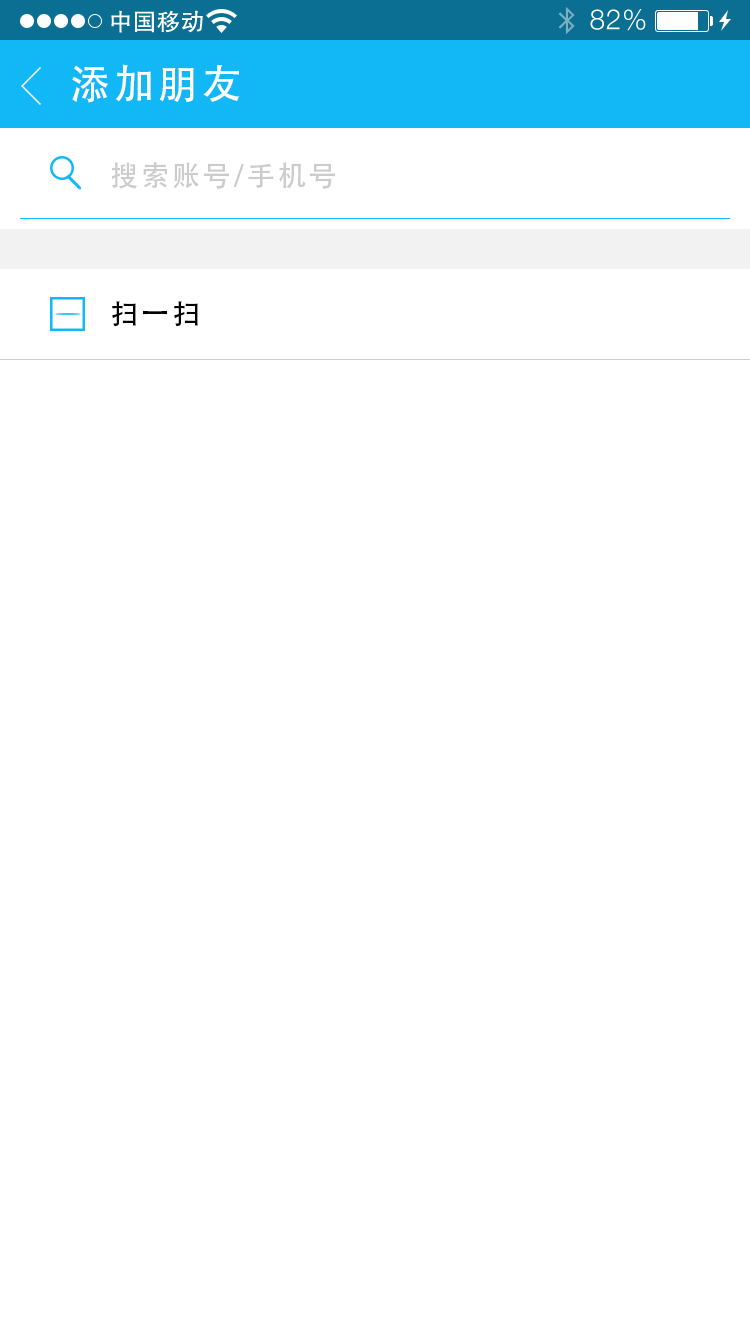
<style>
.page{position:relative;width:750px;height:1334px;background:#ffffff}
.page>*{position:absolute;margin:0}
.t1{font:40px "AdobeHeitiStd-Regular";letter-spacing:0.104em;color:#ffffff}
.t2{font:28px "AdobeHeitiStd-Regular";letter-spacing:0.104em;color:#cccccc}
.t3{font:28px "AdobeHeitiStd-Regular";letter-spacing:0.104em;color:#000000}
</style>
<div class="page">
<p class="t1" style="left:72px;top:64px;width:168px;height:39px">添加朋友</p>
<p class="t2" style="left:111px;top:162px;width:225px;height:27px">搜索账号/手机号</p>
<p class="t3" style="left:112px;top:301px;width:86px;height:26px">扫一扫</p>
</div>
